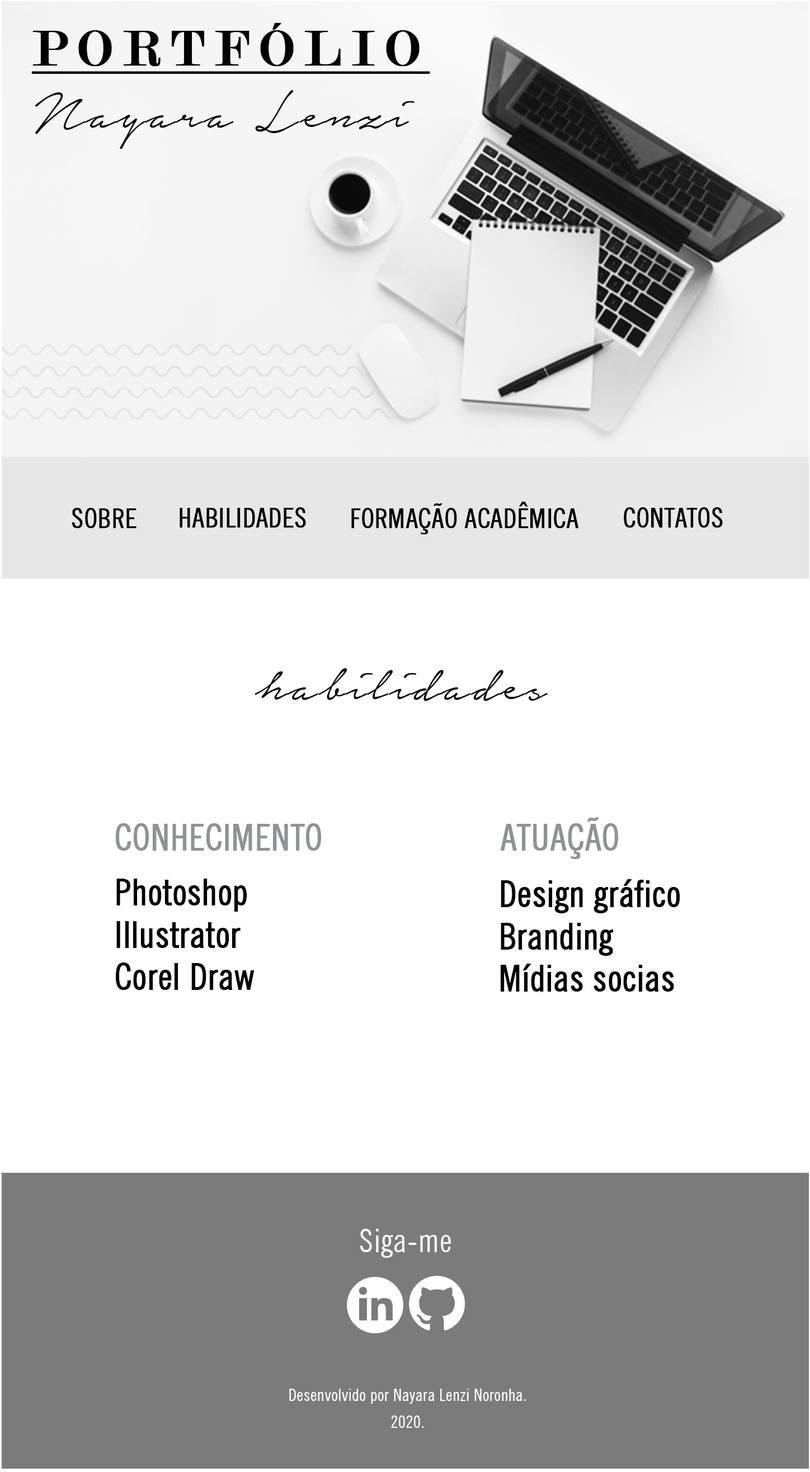
<style>
.page{position:relative;width:810px;height:1472px;background:#ffffff}
.page>*{position:absolute;margin:0}
.t1{font:52.3px "Modern-Regular";letter-spacing:0.2em;color:#010101;font-weight:bold;text-decoration:underline}
.t2{font:66.4px "NoteraPersonalUseOnly";letter-spacing:0.025em;color:#010101}
.t3{font:27.4px "NewsGothicBT-RomanCondensed";color:#000000;font-weight:bold}
.t4{font:67.1px "NoteraPersonalUseOnly";letter-spacing:0.025em;color:#000000}
.t5{font:36.3px "NewsGothicBT-RomanCondensed";color:#8e9397;font-weight:bold}
.t6{font:36.3px/42.4px "NewsGothicBT-RomanCondensed";color:#000000;font-weight:bold}
.t7{font:31.9px "NewsGothicBT-RomanCondensed";letter-spacing:0.025em;color:#ffffff}
.t8{font:16.8px/26.8px "NewsGothicBT-RomanCondensed";letter-spacing:0.025em;color:#ffffff}
</style>
<div class="page">
<p class="t1" style="left:31px;top:23px;width:399px;height:51px">PORTFÓLIO</p>
<p class="t2" style="left:35px;top:90px;width:379px;height:59px">Nayara Lenzi</p>
<p class="t3" style="left:72px;top:508px;width:64px;height:21px">SOBRE</p>
<p class="t3" style="left:180px;top:507px;width:126px;height:21px">HABILIDADES</p>
<p class="t3" style="left:351px;top:502px;width:228px;height:33px">FORMAÇÃO ACADÊMICA</p>
<p class="t3" style="left:624px;top:507px;width:99px;height:21px">CONTATOS</p>
<p class="t4" style="left:255px;top:668px;width:293px;height:33px">habilidades</p>
<p class="t5" style="left:500px;top:817px;width:119px;height:42px">ATUAÇÃO</p>
<p class="t5" style="left:115px;top:823px;width:207px;height:28px">CONHECIMENTO</p>
<p class="t6" style="left:115px;top:879px;width:140px;height:111px">Photoshop<br>Illustrator<br>Corel Draw</p>
<p class="t6" style="left:501px;top:879px;width:179px;height:113px">Design gráfico<br>Branding<br>Mídias socias</p>
<p class="t7" style="left:360px;top:1229px;width:91px;height:29px">Siga-me</p>
<p class="t8" style="left:289px;top:1389px;width:237px;height:39px;text-align:center">Desenvolvido por Nayara Lenzi Noronha.<br>2020.</p>
</div>
